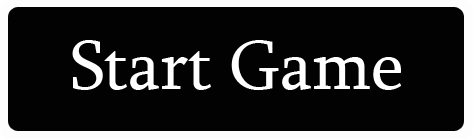
<style>
.page{position:relative;width:474px;height:140px;background:#030202}
.page>*{position:absolute;margin:0}
.t1{font:72px "Sylfaen";color:#ffffff}
</style>
<div class="page">
<p class="t1" style="left:72px;top:40px;width:329px;height:50px">Start Game</p>
</div>
